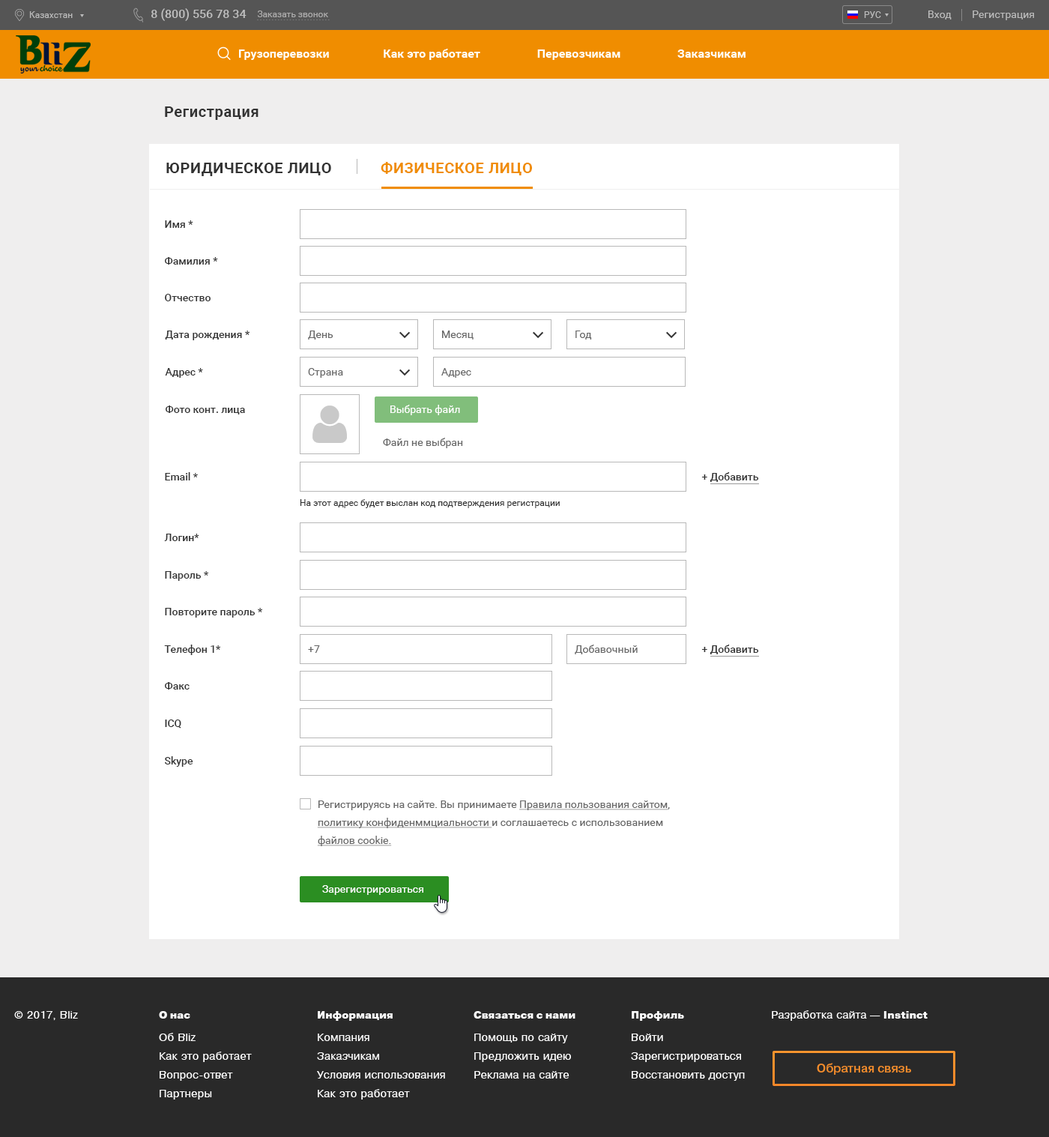
<style>
.page{position:relative;width:1049px;height:1137px;background:#ffffff}
.page>*{position:absolute;margin:0}
.t1{font:15px "Roboto-Bold";letter-spacing:0.03em;color:#333333}
.t2{font:15px "Roboto-Bold";letter-spacing:0.03em;color:#333333;text-transform:uppercase}
.t3{font:15px "Roboto-Bold";letter-spacing:0.03em;color:#f08d00;text-transform:uppercase}
.t4{font:10.5px "Roboto-Medium";color:#333333}
.t5{font:10.5px "Roboto-Regular";color:#666666}
.t6{font:10.5px "Roboto-Regular";color:#ffffff}
.t7{font:9px "Roboto-Regular";color:#333333}
.t8{font:10.5px/18px "Roboto-Regular";color:#666666}
.t9{font:10.5px/18px "Roboto-Regular";color:#666666;text-decoration:underline}
</style>
<div class="page">
<p class="t1" style="left:165px;top:106px;width:94px;height:14px">Регистрация</p>
<p class="t2" style="left:166px;top:162px;width:366px;height:14px">Юридическое лицо             <span class="t3">Физическое лицо</span></p>
<p class="t4" style="left:165px;top:220px;width:28px;height:8px">Имя *</p>
<p class="t4" style="left:165px;top:257px;width:53px;height:8px">Фамилия *</p>
<p class="t4" style="left:165px;top:294px;width:46px;height:7px">Отчество</p>
<p class="t4" style="left:165px;top:330px;width:85px;height:10px">Дата рождения *</p>
<p class="t5" style="left:308px;top:330px;width:25px;height:9px">День</p>
<p class="t5" style="left:442px;top:330px;width:32px;height:9px">Месяц</p>
<p class="t5" style="left:575px;top:330px;width:17px;height:9px">Год</p>
<p class="t4" style="left:165px;top:368px;width:38px;height:10px">Адрес *</p>
<p class="t5" style="left:308px;top:368px;width:35px;height:10px">Страна</p>
<p class="t5" style="left:441px;top:368px;width:30px;height:10px">Адрес</p>
<p class="t4" style="left:166px;top:405px;width:79px;height:9px">Фото конт. лица</p>
<p class="t6" style="left:390px;top:405px;width:70px;height:10px">Выбрать файл</p>
<p class="t5" style="left:383px;top:438px;width:80px;height:10px">Файл не выбран</p>
<p class="t4" style="left:165px;top:472px;width:33px;height:8px">Email *</p>
<p class="t4" style="left:701px;top:472px;width:58px;height:10px">+ Добавить</p>
<p class="t7" style="left:300px;top:499px;width:260px;height:9px">На этот адрес будет выслан код подтверждения регистрации</p>
<p class="t4" style="left:164px;top:534px;width:35px;height:7px">Логин*</p>
<p class="t4" style="left:165px;top:571px;width:43px;height:10px">Пароль *</p>
<p class="t4" style="left:165px;top:608px;width:97px;height:9px">Повторите пароль *</p>
<p class="t4" style="left:164px;top:644px;width:56px;height:11px">Телефон 1*</p>
<p class="t5" style="left:308px;top:645px;width:12px;height:8px">+7</p>
<p class="t5" style="left:575px;top:644px;width:63px;height:10px">Добавочный</p>
<p class="t4" style="left:701px;top:644px;width:58px;height:10px">+ Добавить</p>
<p class="t4" style="left:165px;top:682px;width:25px;height:7px">Факс</p>
<p class="t4" style="left:165px;top:719px;width:16px;height:9px">ICQ</p>
<p class="t4" style="left:165px;top:756px;width:28px;height:11px">Skype</p>
<p class="t8" style="left:317px;top:800px;width:353px;height:46px">Регистрируясь на сайте. Вы принимаете <span class="t9">Правила пользования сайтом</span>, <span class="t9">политику конфиденммциальности </span>и соглашаетесь с использованием <span class="t9">файлов cookie.</span></p>
<p class="t6" style="left:322px;top:885px;width:101px;height:10px">Зарегистрироваться</p>
</div>
